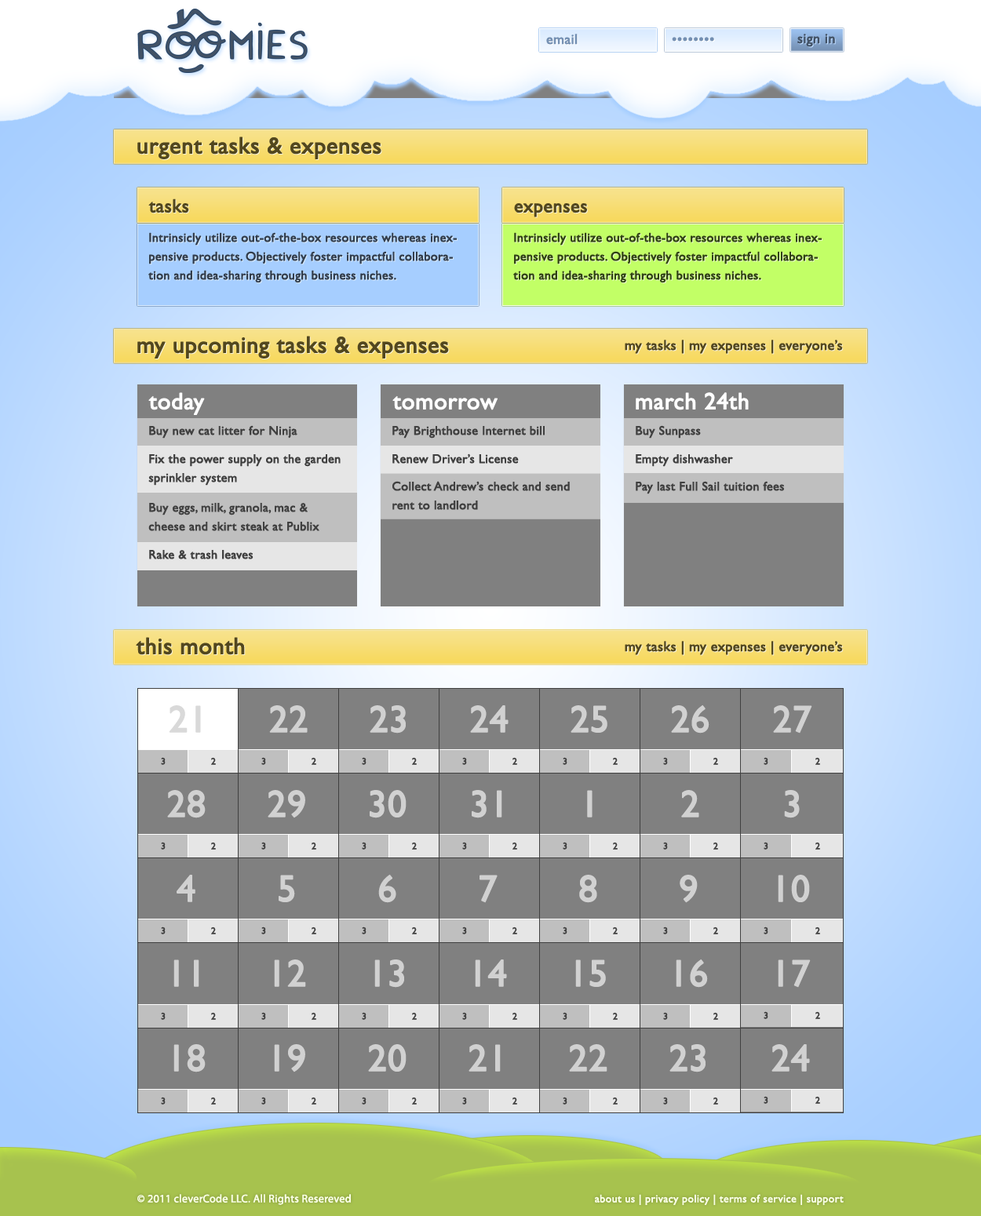
<style>
.page{position:relative;width:981px;height:1216px}
.page>*{position:absolute;margin:0}
.t1{font:14.1px "GillSans";color:#7490b3;font-weight:bold}
.t2{font:14.1px "GillSans";color:#425266;font-weight:bold}
.t3{font:23.5px "GillSans";color:#52471e;font-weight:bold}
.t4{font:18.8px "GillSans";color:#52471e;font-weight:bold}
.t5{font:12.6px/18.8px "GillSans";color:#323e4d;font-weight:bold}
.t6{font:12.6px/18.8px "GillSans";color:#304214;font-weight:bold}
.t7{font:14.1px "GillSans";color:#52471e;font-weight:bold}
.t8{font:23.5px "GillSans";color:#ffffff;font-weight:bold}
.t9{font:12.6px "GillSans";color:#404040;font-weight:bold}
.t10{font:12.6px/18.8px "GillSans";color:#404040;font-weight:bold}
.t11{font:37.7px "GillSans";color:#d9d9d9;font-weight:bold}
.t12{font:37.7px "GillSans";color:#d1d1d1;font-weight:bold}
.t13{font:9.4px "GillSans";color:#404040;font-weight:bold}
.t14{font:11px "MyriadPro-Regular";color:#f9ffe5;font-weight:bold}
.t15{font:11px "GillSans";color:#f9ffe5;font-weight:bold}
</style>
<div class="page">
<p class="t1" style="left:546px;top:34px;width:31px;height:11px">email</p>
<p class="t1" style="left:672px;top:37px;width:42px;height:5px">••••••••</p>
<p class="t2" style="left:797px;top:34px;width:38px;height:13px">sign in</p>
<p class="t3" style="left:137px;top:137px;width:244px;height:22px">urgent tasks &amp; expenses</p>
<p class="t4" style="left:148px;top:198px;width:41px;height:15px">tasks</p>
<p class="t4" style="left:514px;top:203px;width:73px;height:14px">expenses</p>
<p class="t5" style="left:148px;top:232px;width:309px;height:51px">Intrinsicly utilize out-of-the-box resources whereas inexpensive products. Objectively foster impactful collaboration and idea-sharing through business niches.</p>
<p class="t6" style="left:513px;top:232px;width:308px;height:51px">Intrinsicly utilize out-of-the-box resources whereas inexpensive products. Objectively foster impactful collaboration and idea-sharing through business niches.</p>
<p class="t3" style="left:137px;top:336px;width:312px;height:23px">my upcoming tasks &amp; expenses</p>
<p class="t7" style="left:624px;top:340px;width:219px;height:14px">my tasks | my expenses | everyone’s</p>
<p class="t8" style="left:148px;top:392px;width:57px;height:23px">today</p>
<p class="t8" style="left:392px;top:395px;width:105px;height:15px">tomorrow</p>
<p class="t8" style="left:635px;top:392px;width:113px;height:18px">march 24th</p>
<p class="t9" style="left:149px;top:425px;width:148px;height:14px">Buy new cat litter for Ninja</p>
<p class="t9" style="left:392px;top:426px;width:152px;height:13px">Pay Brighthouse Internet bill</p>
<p class="t9" style="left:635px;top:425px;width:66px;height:14px">Buy Sunpass</p>
<p class="t10" style="left:148px;top:454px;width:192px;height:32px">Fix the power supply on the garden sprinkler system</p>
<p class="t9" style="left:392px;top:453px;width:127px;height:11px">Renew Driver’s License</p>
<p class="t9" style="left:635px;top:454px;width:98px;height:13px">Empty dishwasher</p>
<p class="t10" style="left:392px;top:481px;width:178px;height:29px">Collect Andrew’s check and send rent to landlord</p>
<p class="t9" style="left:635px;top:481px;width:149px;height:13px">Pay last Full Sail tuition fees</p>
<p class="t10" style="left:148px;top:503px;width:171px;height:28px">Buy eggs, milk, granola, mac &amp; cheese and skirt steak at Publix</p>
<p class="t9" style="left:149px;top:550px;width:104px;height:9px">Rake &amp; trash leaves</p>
<p class="t3" style="left:136px;top:637px;width:109px;height:18px">this month</p>
<p class="t7" style="left:624px;top:641px;width:219px;height:14px">my tasks | my expenses | everyone’s</p>
<p class="t11" style="left:169px;top:705px;width:32px;height:28px">21</p>
<p class="t12" style="left:269px;top:705px;width:39px;height:28px">22</p>
<p class="t12" style="left:370px;top:705px;width:36px;height:29px">23</p>
<p class="t12" style="left:470px;top:705px;width:38px;height:28px">24</p>
<p class="t12" style="left:570px;top:705px;width:37px;height:28px">25</p>
<p class="t12" style="left:671px;top:704px;width:38px;height:30px">26</p>
<p class="t12" style="left:773px;top:705px;width:39px;height:29px">27</p>
<p class="t13" style="left:161px;top:757px;width:5px;height:8px">3</p>
<p class="t13" style="left:211px;top:757px;width:5px;height:8px">2</p>
<p class="t13" style="left:261px;top:757px;width:5px;height:8px">3</p>
<p class="t13" style="left:311px;top:757px;width:5px;height:8px">2</p>
<p class="t13" style="left:362px;top:757px;width:4px;height:8px">3</p>
<p class="t13" style="left:412px;top:757px;width:5px;height:8px">2</p>
<p class="t13" style="left:462px;top:757px;width:5px;height:8px">3</p>
<p class="t13" style="left:512px;top:757px;width:5px;height:8px">2</p>
<p class="t13" style="left:562px;top:757px;width:5px;height:8px">3</p>
<p class="t13" style="left:613px;top:757px;width:4px;height:8px">2</p>
<p class="t13" style="left:663px;top:757px;width:5px;height:8px">3</p>
<p class="t13" style="left:713px;top:757px;width:5px;height:8px">2</p>
<p class="t13" style="left:763px;top:757px;width:5px;height:8px">3</p>
<p class="t13" style="left:815px;top:757px;width:5px;height:8px">2</p>
<p class="t12" style="left:167px;top:790px;width:39px;height:28px">28</p>
<p class="t12" style="left:268px;top:790px;width:37px;height:28px">29</p>
<p class="t12" style="left:370px;top:790px;width:36px;height:28px">30</p>
<p class="t12" style="left:471px;top:790px;width:31px;height:28px">31</p>
<p class="t12" style="left:587px;top:790px;width:5px;height:27px">1</p>
<p class="t12" style="left:681px;top:790px;width:18px;height:27px">2</p>
<p class="t12" style="left:784px;top:790px;width:15px;height:28px">3</p>
<p class="t13" style="left:161px;top:842px;width:5px;height:8px">3</p>
<p class="t13" style="left:211px;top:842px;width:5px;height:8px">2</p>
<p class="t13" style="left:261px;top:842px;width:5px;height:8px">3</p>
<p class="t13" style="left:311px;top:842px;width:5px;height:8px">2</p>
<p class="t13" style="left:362px;top:842px;width:4px;height:8px">3</p>
<p class="t13" style="left:412px;top:842px;width:5px;height:8px">2</p>
<p class="t13" style="left:462px;top:842px;width:5px;height:8px">3</p>
<p class="t13" style="left:512px;top:842px;width:5px;height:8px">2</p>
<p class="t13" style="left:562px;top:842px;width:5px;height:8px">3</p>
<p class="t13" style="left:613px;top:842px;width:4px;height:8px">2</p>
<p class="t13" style="left:663px;top:842px;width:5px;height:8px">3</p>
<p class="t13" style="left:713px;top:842px;width:5px;height:8px">2</p>
<p class="t13" style="left:763px;top:842px;width:5px;height:8px">3</p>
<p class="t13" style="left:815px;top:842px;width:5px;height:8px">2</p>
<p class="t12" style="left:177px;top:875px;width:18px;height:27px">4</p>
<p class="t12" style="left:278px;top:875px;width:17px;height:27px">5</p>
<p class="t12" style="left:378px;top:874px;width:18px;height:29px">6</p>
<p class="t12" style="left:479px;top:875px;width:18px;height:28px">7</p>
<p class="t12" style="left:579px;top:875px;width:18px;height:28px">8</p>
<p class="t12" style="left:679px;top:875px;width:18px;height:28px">9</p>
<p class="t12" style="left:777px;top:875px;width:33px;height:27px">10</p>
<p class="t13" style="left:161px;top:927px;width:5px;height:7px">3</p>
<p class="t13" style="left:211px;top:927px;width:5px;height:7px">2</p>
<p class="t13" style="left:261px;top:927px;width:5px;height:7px">3</p>
<p class="t13" style="left:311px;top:927px;width:5px;height:7px">2</p>
<p class="t13" style="left:362px;top:927px;width:4px;height:7px">3</p>
<p class="t13" style="left:412px;top:927px;width:5px;height:7px">2</p>
<p class="t13" style="left:462px;top:927px;width:5px;height:7px">3</p>
<p class="t13" style="left:512px;top:927px;width:5px;height:7px">2</p>
<p class="t13" style="left:562px;top:927px;width:5px;height:7px">3</p>
<p class="t13" style="left:613px;top:927px;width:4px;height:7px">2</p>
<p class="t13" style="left:663px;top:927px;width:5px;height:7px">3</p>
<p class="t13" style="left:713px;top:927px;width:5px;height:7px">2</p>
<p class="t13" style="left:763px;top:927px;width:5px;height:7px">3</p>
<p class="t13" style="left:815px;top:927px;width:5px;height:7px">2</p>
<p class="t12" style="left:173px;top:959px;width:26px;height:28px">11</p>
<p class="t12" style="left:274px;top:959px;width:32px;height:28px">12</p>
<p class="t12" style="left:374px;top:959px;width:30px;height:29px">13</p>
<p class="t12" style="left:475px;top:959px;width:32px;height:28px">14</p>
<p class="t12" style="left:575px;top:959px;width:31px;height:28px">15</p>
<p class="t12" style="left:675px;top:959px;width:33px;height:29px">16</p>
<p class="t12" style="left:777px;top:959px;width:33px;height:29px">17</p>
<p class="t13" style="left:161px;top:1012px;width:5px;height:8px">3</p>
<p class="t13" style="left:211px;top:1012px;width:5px;height:8px">2</p>
<p class="t13" style="left:261px;top:1012px;width:5px;height:8px">3</p>
<p class="t13" style="left:311px;top:1012px;width:5px;height:8px">2</p>
<p class="t13" style="left:362px;top:1012px;width:4px;height:8px">3</p>
<p class="t13" style="left:412px;top:1012px;width:5px;height:8px">2</p>
<p class="t13" style="left:462px;top:1012px;width:5px;height:8px">3</p>
<p class="t13" style="left:512px;top:1012px;width:5px;height:8px">2</p>
<p class="t13" style="left:562px;top:1012px;width:5px;height:8px">3</p>
<p class="t13" style="left:613px;top:1012px;width:4px;height:8px">2</p>
<p class="t13" style="left:663px;top:1012px;width:5px;height:8px">3</p>
<p class="t13" style="left:713px;top:1012px;width:5px;height:8px">2</p>
<p class="t13" style="left:763px;top:1011px;width:5px;height:8px">3</p>
<p class="t13" style="left:815px;top:1011px;width:5px;height:8px">2</p>
<p class="t12" style="left:173px;top:1044px;width:33px;height:28px">18</p>
<p class="t12" style="left:274px;top:1044px;width:31px;height:28px">19</p>
<p class="t12" style="left:368px;top:1044px;width:38px;height:28px">20</p>
<p class="t12" style="left:468px;top:1044px;width:33px;height:28px">21</p>
<p class="t12" style="left:569px;top:1044px;width:38px;height:28px">22</p>
<p class="t12" style="left:669px;top:1044px;width:36px;height:28px">23</p>
<p class="t12" style="left:771px;top:1044px;width:39px;height:28px">24</p>
<p class="t13" style="left:161px;top:1097px;width:5px;height:8px">3</p>
<p class="t13" style="left:211px;top:1097px;width:5px;height:8px">2</p>
<p class="t13" style="left:261px;top:1097px;width:5px;height:8px">3</p>
<p class="t13" style="left:311px;top:1097px;width:5px;height:8px">2</p>
<p class="t13" style="left:362px;top:1097px;width:4px;height:8px">3</p>
<p class="t13" style="left:412px;top:1097px;width:5px;height:8px">2</p>
<p class="t13" style="left:462px;top:1097px;width:5px;height:8px">3</p>
<p class="t13" style="left:512px;top:1097px;width:5px;height:8px">2</p>
<p class="t13" style="left:562px;top:1097px;width:5px;height:8px">3</p>
<p class="t13" style="left:613px;top:1097px;width:4px;height:8px">2</p>
<p class="t13" style="left:663px;top:1097px;width:5px;height:8px">3</p>
<p class="t13" style="left:713px;top:1097px;width:5px;height:8px">2</p>
<p class="t13" style="left:763px;top:1096px;width:5px;height:8px">3</p>
<p class="t13" style="left:815px;top:1096px;width:5px;height:8px">2</p>
<p class="t14" style="left:137px;top:1194px;width:214px;height:11px">© 2011 cleverCode LLC. All Rights Resereved</p>
<p class="t15" style="left:595px;top:1194px;width:248px;height:11px">about us | privacy policy | terms of service | support</p>
</div>
